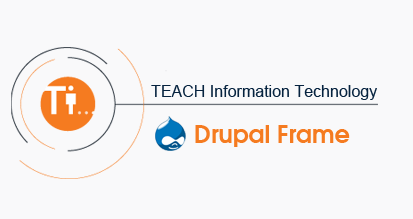
<style>
.page{position:relative;width:413px;height:219px;background:#f9f9fa}
.page>*{position:absolute;margin:0}
.t1{font:16px "ArialMT";color:#06233f}
.t2{font:24px "AvantGarde-Demi";color:#f57b20}
</style>
<div class="page">
<p class="t1" style="left:151px;top:85px;width:226px;height:15px">TEACH Information Technology</p>
<p class="t2" style="left:195px;top:125px;width:155px;height:22px">Drupal Frame</p>
</div>
